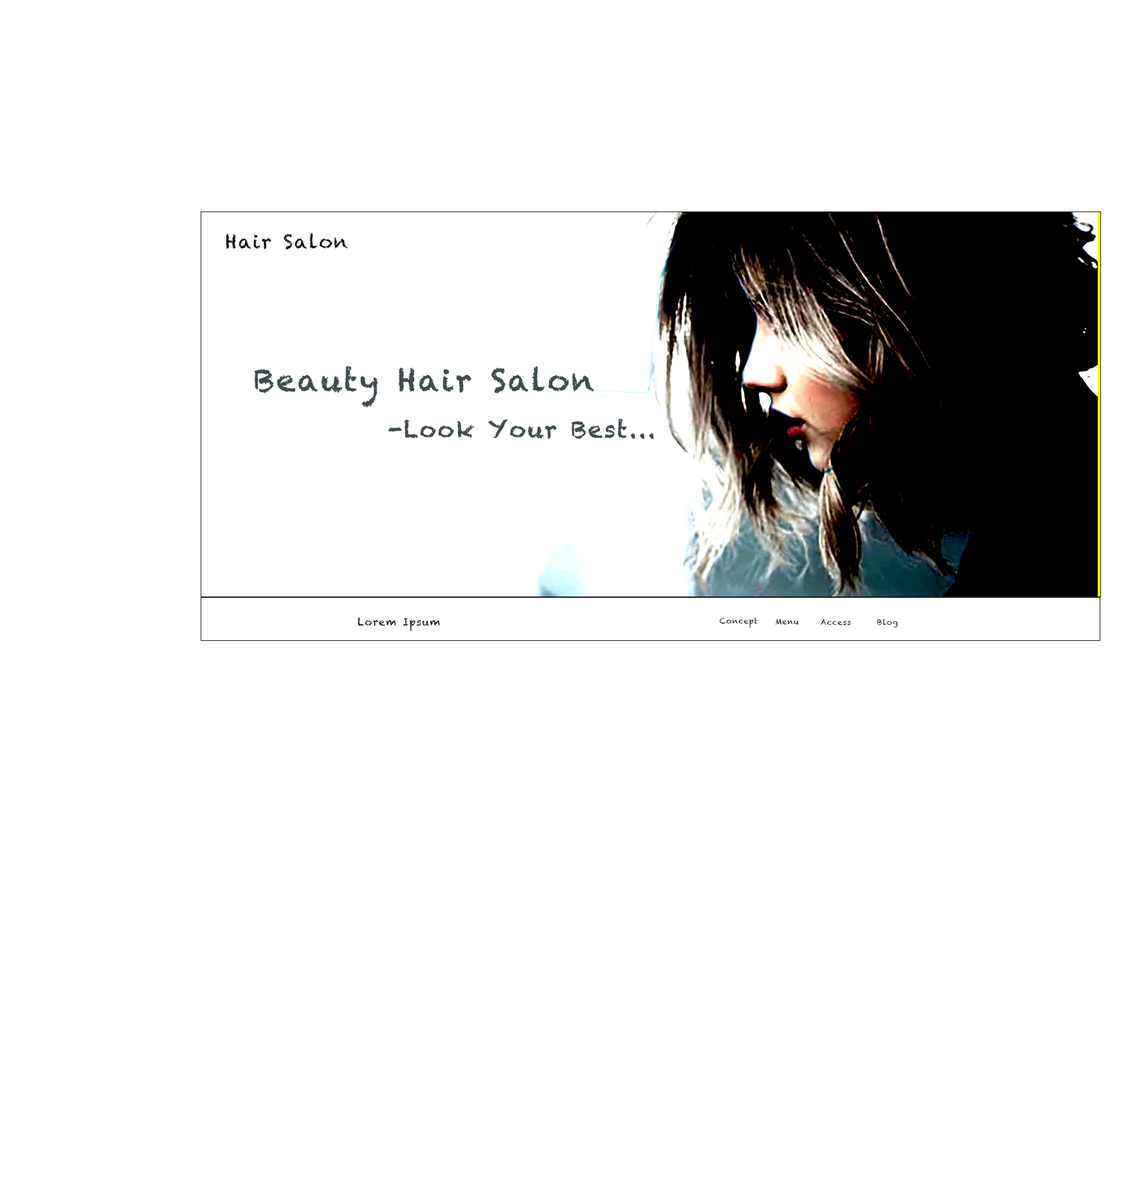
<style>
.page{position:relative;width:1137px;height:1193px;background:#ffffff}
.page>*{position:absolute;margin:0}
.t1{font:19.3px "Chalkduster";letter-spacing:0.06em;color:#0e0d0d}
.t2{font:30.9px "Chalkduster";letter-spacing:0.06em;color:#3d4b50}
.t3{font:23.1px "Chalkduster";letter-spacing:0.06em;color:#3d4b50}
.t4{font:10.3px "Chalkduster";letter-spacing:0.06em;color:#0e0d0d}
.t5{font:7.7px "Chalkduster";letter-spacing:0.06em;color:#0e0d0d}
</style>
<div class="page">
<p class="t1" style="left:226px;top:233px;width:122px;height:17px">Hair Salon</p>
<p class="t2" style="left:254px;top:366px;width:340px;height:42px">Beauty Hair Salon</p>
<p class="t3" style="left:388px;top:419px;width:266px;height:20px">-Look Your Best...</p>
<p class="t4" style="left:357px;top:618px;width:83px;height:13px">Lorem Ipsum</p>
<p class="t5" style="left:719px;top:617px;width:38px;height:11px">Concept</p>
<p class="t5" style="left:775px;top:618px;width:24px;height:8px">Menu</p>
<p class="t5" style="left:820px;top:619px;width:31px;height:7px">Access</p>
<p class="t5" style="left:877px;top:618px;width:20px;height:10px">Blog</p>
</div>
